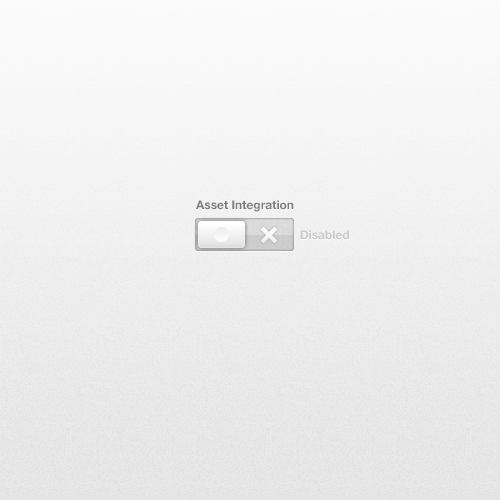
<style>
.page{position:relative;width:500px;height:500px}
.page>*{position:absolute;margin:0}
.t1{font:12px "HelveticaNeue-Bold";color:#7d7d7d}
.t2{font:12px "HelveticaNeue-Bold";color:#cacaca}
.t3{font:12px "HelveticaNeue-Bold";color:#777777}
</style>
<div class="page">
<p class="t1" style="left:196px;top:200px;width:98px;height:12px">Asset Integration</p>
<p class="t2" style="left:300px;top:230px;width:49px;height:10px"><span class="t3"> </span>Disabled</p>
</div>
